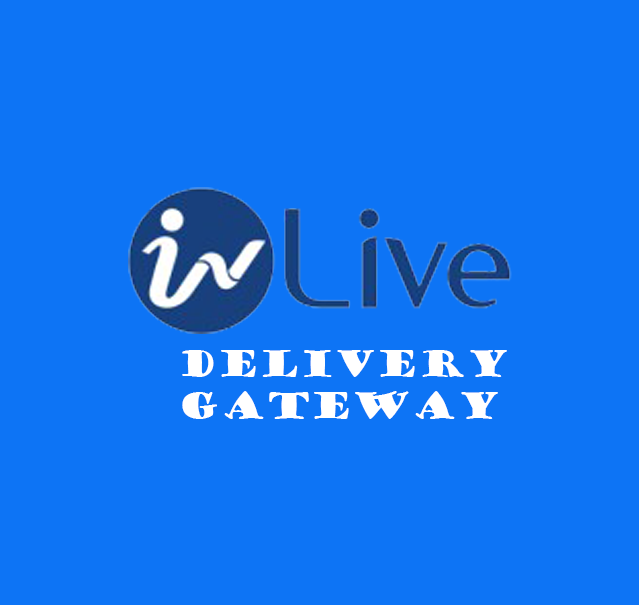
<style>
.page{position:relative;width:639px;height:605px;background:#0d74f5}
.page>*{position:absolute;margin:0}
.t1{font:34.6px "GoudyStout";color:#ffffff}
</style>
<div class="page">
<p class="t1" style="left:182px;top:350px;width:325px;height:69px">Delivery <br> Gateway</p>
</div>
